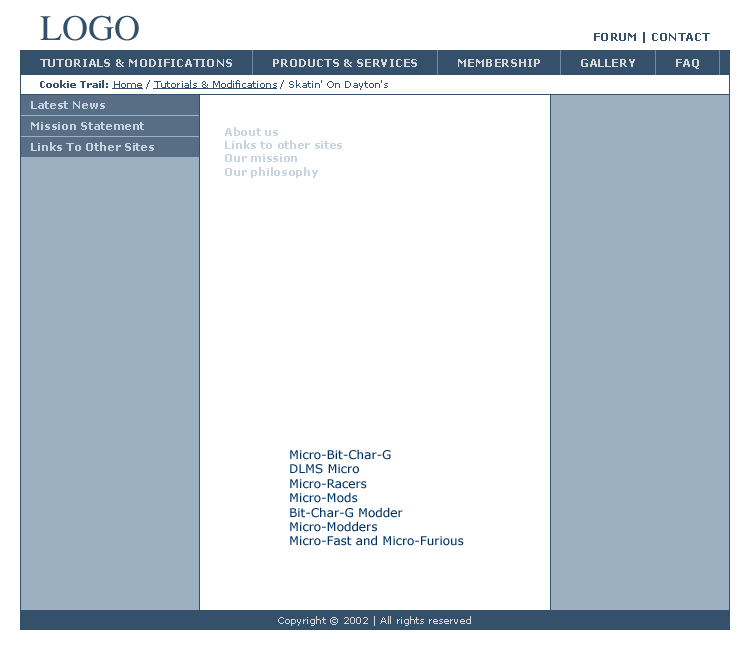
<style>
.page{position:relative;width:750px;height:650px;background:#ffffff}
.page>*{position:absolute;margin:0}
.t1{font:36px "Times-Roman";color:#34506b}
.t2{font:11px "Verdana-Bold";color:#34506b}
.t3{font:11px "Verdana-Bold";color:#d8d8d8}
.t4{font:10px "Verdana";color:#34506b;text-decoration:underline}
.t5{font:10px "Verdana-Bold";color:#34506b}
.t6{font:10px "Verdana";color:#34506b}
.t7{font:11px "Verdana-Bold";color:#c8d4df}
.t8{font:12px "Verdana";color:#003366}
.t9{font:10px "Verdana";color:#d8d8d8}
</style>
<div class="page">
<p class="t1" style="left:40px;top:15px;width:99px;height:26px">LOGO</p>
<p class="t2" style="left:594px;top:32px;width:116px;height:11px">FORUM | CONTACT</p>
<p class="t3" style="left:40px;top:59px;width:192px;height:8px">TUTORIALS &amp; MODIFICATIONS</p>
<p class="t3" style="left:273px;top:59px;width:144px;height:8px">PRODUCTS &amp; SERVICES</p>
<p class="t3" style="left:458px;top:59px;width:82px;height:8px">MEMBERSHIP</p>
<p class="t3" style="left:581px;top:59px;width:54px;height:8px">GALLERY</p>
<p class="t3" style="left:676px;top:59px;width:23px;height:10px">FAQ</p>
<p class="t4" style="left:40px;top:80px;width:348px;height:10px"><span class="t5">Cookie Trail: </span>Home<span class="t6"> / </span>Tutorials &amp; Modifications<span class="t6"> / Skatin' On Dayton's</span></p>
<p class="t7" style="left:31px;top:101px;width:74px;height:8px">Latest News</p>
<p class="t7" style="left:31px;top:122px;width:113px;height:8px">Mission Statement</p>
<p class="t7" style="left:225px;top:127px;width:117px;height:51px">About us<br>Links to other sites<br>Our mission<br>Our philosophy</p>
<p class="t7" style="left:31px;top:142px;width:123px;height:9px">Links To Other Sites</p>
<p class="t8" style="left:290px;top:449px;width:174px;height:97px">Micro-Bit-Char-G<br>DLMS Micro<br>Micro-Racers<br>Micro-Mods<br>Bit-Char-G Modder<br>Micro-Modders<br>Micro-Fast and Micro-Furious</p>
<p class="t9" style="left:278px;top:616px;width:193px;height:10px">Copyright © 2002 | All rights reserved</p>
</div>
